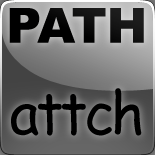
<style>
.page{position:relative;width:155px;height:155px}
.page>*{position:absolute;margin:0}
.t1{font:48.6px "Arial-Black";color:#070707}
.t2{font:58.3px "ComicSansMS";letter-spacing:-0.06em;color:#000000}
</style>
<div class="page">
<p class="t1" style="left:9px;top:8px;width:135px;height:35px">PATH</p>
<p class="t2" style="left:11px;top:88px;width:131px;height:48px">attch</p>
</div>
